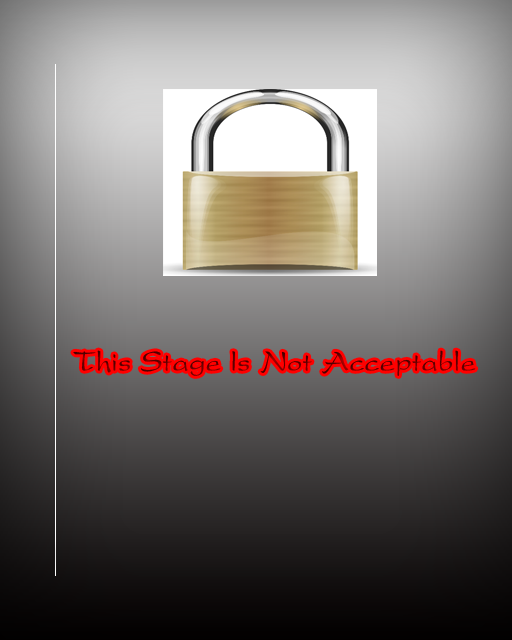
<style>
.page{position:relative;width:512px;height:640px}
.page>*{position:absolute;margin:0}
.t1{font:30px "Yj-NANCHO-Medium"}
</style>
<div class="page">
<p class="t1" style="left:73px;top:350px;width:403px;height:26px">This Stage Is Not Acceptable</p>
</div>
